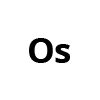
<style>
.page{position:relative;width:100px;height:100px;background:#ffffff}
.page>*{position:absolute;margin:0}
.t1{font:35px "OpenSans-Bold";color:#000000}
</style>
<div class="page">
<p class="t1" style="left:29px;top:38px;width:41px;height:25px">Os</p>
</div>
